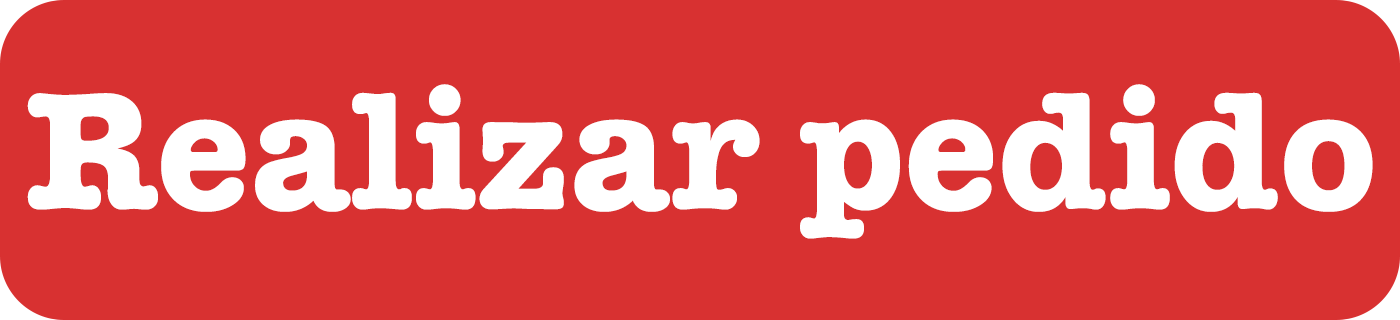
<style>
.page{position:relative;width:1400px;height:320px;background:#d83131}
.page>*{position:absolute;margin:0}
.t1{font:172px "AmericanTypewriter-Bold";color:#ffffff}
</style>
<div class="page">
<p class="t1" style="left:27px;top:84px;width:1346px;height:155px">Realizar pedido</p>
</div>
